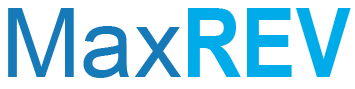
<style>
.page{position:relative;width:355px;height:89px;background:#ffffff}
.page>*{position:absolute;margin:0}
.t1{font:95.9px "ArialMT";color:#167ab8}
.t2{font:95.9px "Arial-BoldMT";color:#00abe9;scale:0.86 1}
</style>
<div class="page">
<p class="t1" style="left:8px;top:8px;width:343px;height:70px">Max<span class="t2">REV</span></p>
</div>
